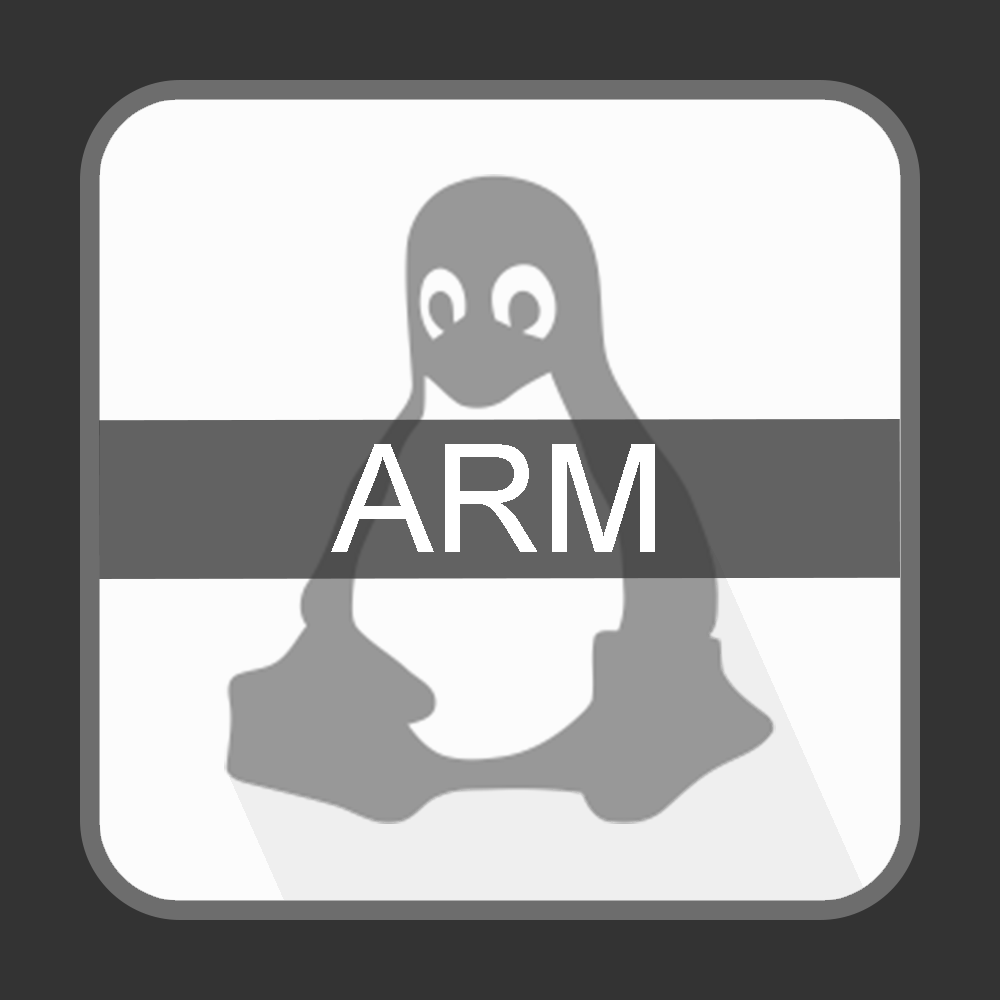
<style>
.page{position:relative;width:1000px;height:1000px;background:#fcfcfc}
.page>*{position:absolute;margin:0}
.t1{font:150px "ArialMT";color:#ffffff}
</style>
<div class="page">
<p class="t1" style="left:331px;top:444px;width:324px;height:108px">ARM</p>
</div>
